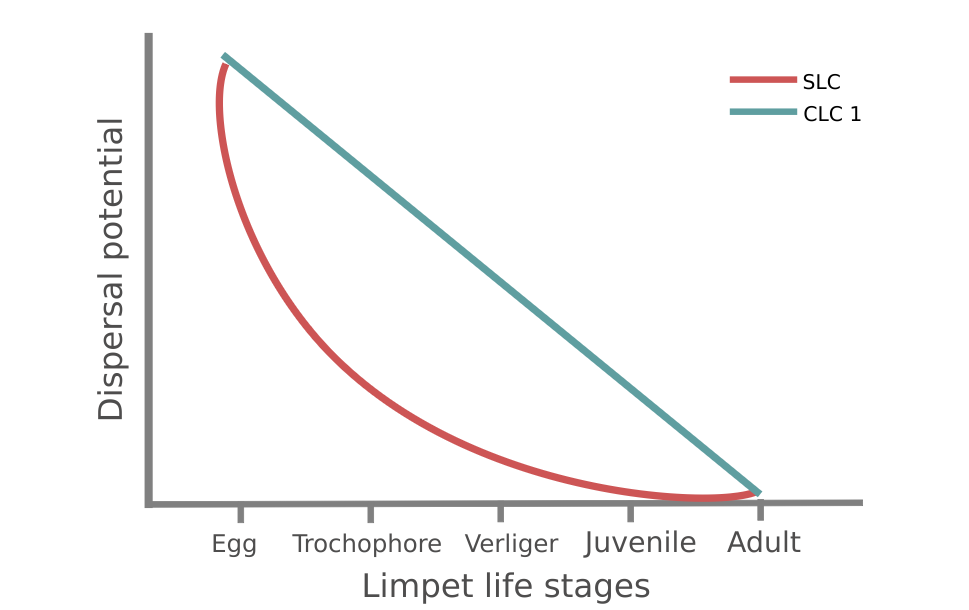
<style>
.page{position:relative;width:969px;height:610px;background:#ffffff}
.page>*{position:absolute;margin:0}
.t1{font:20.3px "DejaVuSans";color:#000000}
.t2{font:32.5px "DejaVuSans";color:#4e4d4d}
.t3{font:24.4px "DejaVuSans";color:#4e4d4d}
.t4{font:28.4px "DejaVuSans";color:#4e4d4d}
</style>
<div class="page">
<p class="t1" style="left:803px;top:73px;width:37px;height:17px">SLC</p>
<p class="t1" style="left:804px;top:105px;width:57px;height:17px">CLC 1</p>
<p class="t2" style="left:97px;top:119px;width:32px;height:301px;rotate:-90deg">Dispersal potential</p>
<p class="t3" style="left:213px;top:534px;width:43px;height:24px">Egg</p>
<p class="t3" style="left:292px;top:533px;width:149px;height:25px">Trochophore</p>
<p class="t3" style="left:464px;top:533px;width:95px;height:25px">Verliger</p>
<p class="t4" style="left:583px;top:530px;width:113px;height:28px">Juvenile</p>
<p class="t4" style="left:727px;top:530px;width:74px;height:23px">Adult</p>
<p class="t2" style="left:364px;top:572px;width:286px;height:32px">Limpet life stages</p>
</div>
